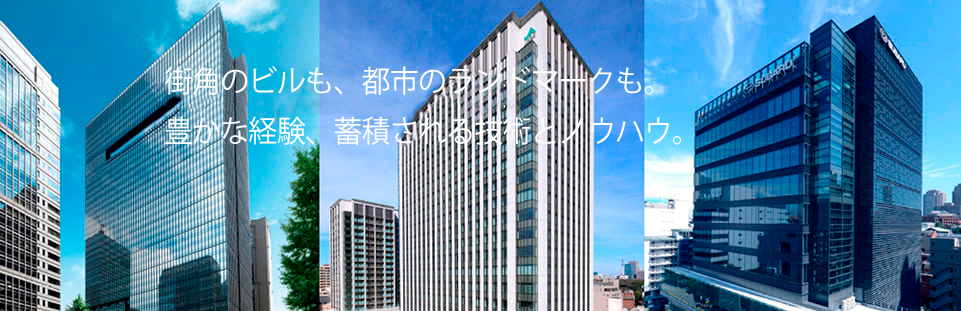
<style>
.page{position:relative;width:961px;height:311px}
.page>*{position:absolute;margin:0}
.t1{font:30px/25px "KozGoPr6N-Regular";letter-spacing:-0.02em;color:#ffffff;scale:0.96 1}
</style>
<div class="page">
<p class="t1" style="left:165px;top:66px;width:516px;height:79px">街角のビルも、都市のランドマークも。<br><br>豊かな経験、蓄積される技術とノウハウ。</p>
</div>
